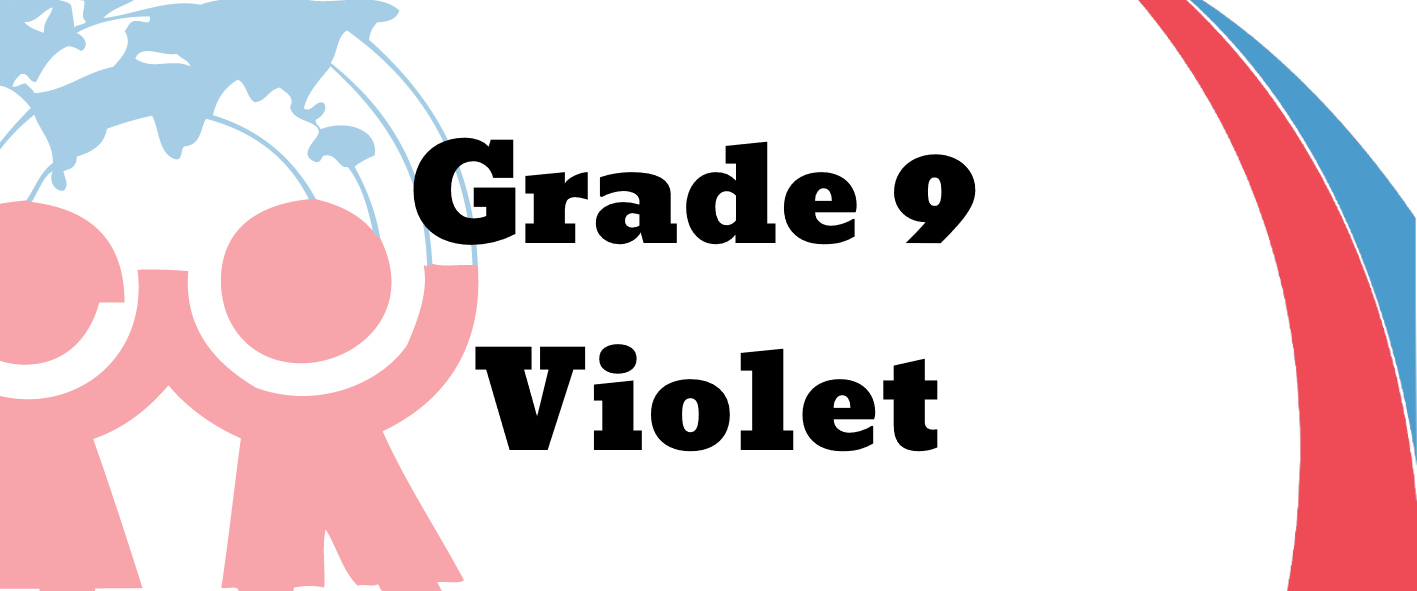
<style>
.page{position:relative;width:1417px;height:591px;background:#ffffff}
.page>*{position:absolute;margin:0}
.t1{font:133px "Bevan-Regular";color:#000000}
</style>
<div class="page">
<p class="t1" style="left:413px;top:137px;width:563px;height:315px;text-align:center">Grade 9 <br>Violet</p>
</div>
